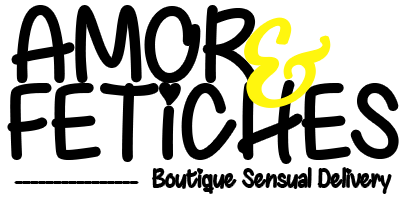
<style>
.page{position:relative;width:400px;height:200px;background:#ffffff}
.page>*{position:absolute;margin:0}
.t1{font:104.7px "ChasingHearts-Regular";letter-spacing:0.01em;color:#000000}
.t2{font:118.8px "FiolexGirls-Regular";letter-spacing:0.01em;color:#fff60e}
.t3{font:25.2px "ChasingHearts-Regular";letter-spacing:0.01em;color:#000000}
</style>
<div class="page">
<p class="t1" style="left:13px;top:7px;width:243px;height:75px">AMOR</p>
<p class="t2" style="left:247px;top:20px;width:81px;height:85px;rotate:-17deg">&amp;</p>
<p class="t1" style="left:9px;top:82px;width:388px;height:80px">FETiCHES</p>
<p class="t3" style="left:153px;top:168px;width:238px;height:25px">Boutique Sensual Delivery</p>
</div>
